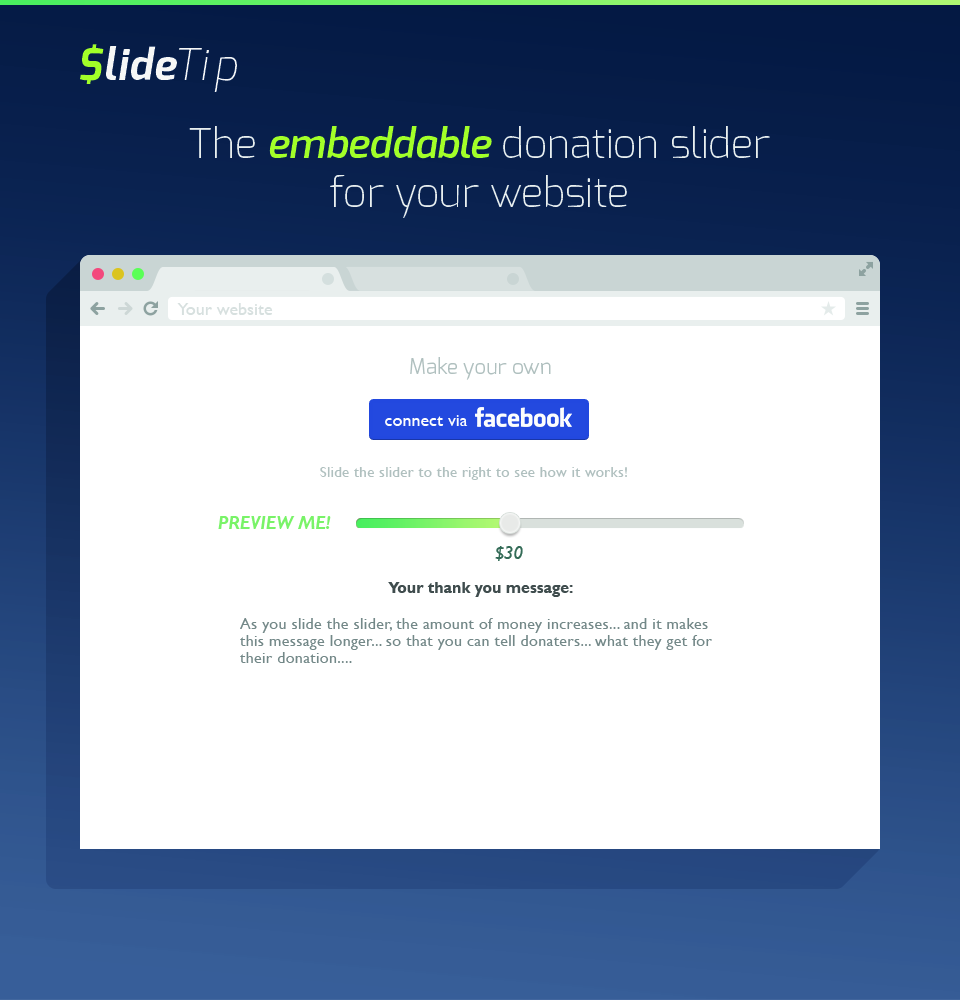
<style>
.page{position:relative;width:960px;height:1000px;background:#ffffff}
.page>*{position:absolute;margin:0}
.t1{font:43px "Exo-BoldItalic";letter-spacing:0.02em;color:#f6f7f6}
.t2{font:43px "Exo-BoldItalic";letter-spacing:0.02em;color:#a3ff28}
.t3{font:43px "Exo-ExtraLightItalic";letter-spacing:0.02em;color:#f6f7f6}
.t4{font:41px "Exo-ExtraLight";color:#e9efee}
.t5{font:41px "Exo-DemiBoldItalic";color:#a3ff28}
.t6{font:18px "GillSansMT";color:#d7e0df}
.t7{font:21px "Exo-Light";color:#b0c0bf}
.t8{font:18px "GillSansMT";color:#fcfdfd}
.t9{font:15px "GillSansMT";letter-spacing:0.02em;color:#b0c0bf}
.t10{font:18px "GillSansMT-BoldItalic";color:#79f368}
.t11{font:18px "GillSansMT-Italic";color:#346b57}
.t12{font:16px/17px "GillSansMT";letter-spacing:0.02em;color:#738787}
.t13{font:16px/36px "GillSansMT-Bold";color:#3f4c4d}
.t14{font:16px/36px "GillSansMT";letter-spacing:0.02em;color:#738787}
</style>
<div class="page">
<p class="t1" style="left:80px;top:44px;width:157px;height:48px"><span class="t2">$</span>lide<span class="t3">Tip</span></p>
<p class="t4" style="left:189px;top:126px;width:581px;height:92px;text-align:center">The <span class="t5">embeddable </span>donation slider<br>for your website</p>
<p class="t6" style="left:177px;top:303px;width:96px;height:12px">Your website</p>
<p class="t7" style="left:410px;top:357px;width:141px;height:23px">Make your own</p>
<p class="t8" style="left:385px;top:415px;width:83px;height:11px">connect via</p>
<p class="t9" style="left:320px;top:467px;width:307px;height:13px">Slide the slider to the right to see how it works!</p>
<p class="t10" style="left:218px;top:516px;width:113px;height:13px">PREVIEW ME!</p>
<p class="t11" style="left:495px;top:546px;width:28px;height:15px">$30</p>
<p class="t12" style="left:240px;top:582px;width:472px;height:81px;text-align:center"><span class="t13">Your thank you message:<br></span><span class="t14">As you slide the slider, the amount of money increases... and it makes </span>this message longer... so that you can tell donaters... what they get for their donation....</p>
</div>
